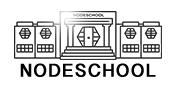
<style>
.page{position:relative;width:175px;height:85px;background:#ffffff}
.page>*{position:absolute;margin:0}
.t1{font:18px "DevanagariSangamMN-Bold";letter-spacing:0.075em;color:#000000;font-weight:bold}
</style>
<div class="page">
<p class="t1" style="left:20px;top:63px;width:136px;height:14px">NODESCHOOL</p>
</div>
